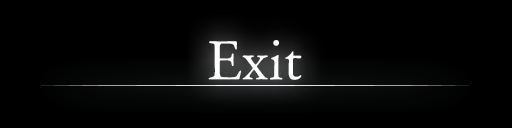
<style>
.page{position:relative;width:512px;height:128px;background:#000000}
.page>*{position:absolute;margin:0}
.t1{font:52px "DayRoman";color:#ffffff}
</style>
<div class="page">
<p class="t1" style="left:208px;top:40px;width:94px;height:40px">Exit</p>
</div>
